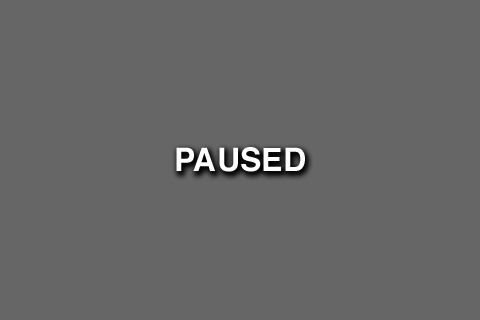
<style>
.page{position:relative;width:480px;height:320px;background:#666666}
.page>*{position:absolute;margin:0}
.t1{font:32.1px "Helvetica-Bold";color:#ffffff}
</style>
<div class="page">
<p class="t1" style="left:176px;top:147px;width:129px;height:25px">PAUSED</p>
</div>
